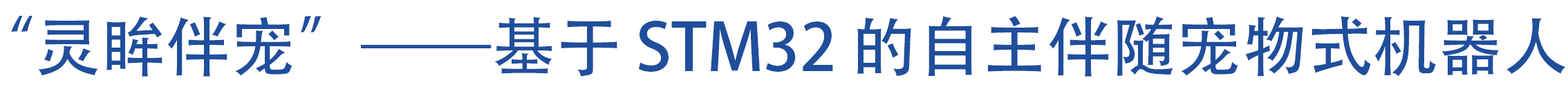
<style>
.page{position:relative;width:1568px;height:98px;background:#ffffff}
.page>*{position:absolute;margin:0}
.t1{font:65.2px "AdobeHeitiStd-Regular";color:#1f4e9c}
</style>
<div class="page">
<p class="t1" style="left:11px;top:15px;width:1555px;height:62px">“灵眸伴宠”——基于 STM32 的自主伴随宠物式机器人</p>
</div>
